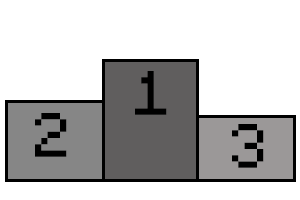
<style>
.page{position:relative;width:300px;height:200px;background:#ffffff}
.page>*{position:absolute;margin:0}
.t1{font:50px "Minecraftia-Regular";color:#000000}
</style>
<div class="page">
<p class="t1" style="left:135px;top:71px;width:32px;height:44px">1</p>
<p class="t1" style="left:35px;top:113px;width:32px;height:44px">2</p>
<p class="t1" style="left:232px;top:124px;width:32px;height:44px">3</p>
</div>
